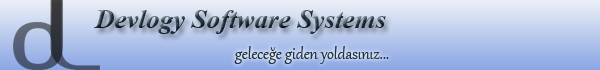
<style>
.page{position:relative;width:600px;height:70px}
.page>*{position:absolute;margin:0}
.t1{font:93.7px "AmerikaSans";scale:1.04 1}
.t2{font:93.6px "AmerikaSans";color:#34373c;scale:1.06 1}
.t3{font:27px "TimesNewRomanPS-BoldItalicMT"}
.t4{font:19px "Gabriola";color:#20353f}
</style>
<div class="page">
<p class="t1" style="left:13px;top:0px;width:50px;height:70px">d</p>
<p class="t2" style="left:50px;top:0px;width:50px;height:70px">L</p>
<p class="t3" style="left:94px;top:10px;width:292px;height:24px">Devlogy Software Systems</p>
<p class="t4" style="left:234px;top:46px;width:155px;height:18px">geleceğe giden yoldasınız...</p>
</div>
